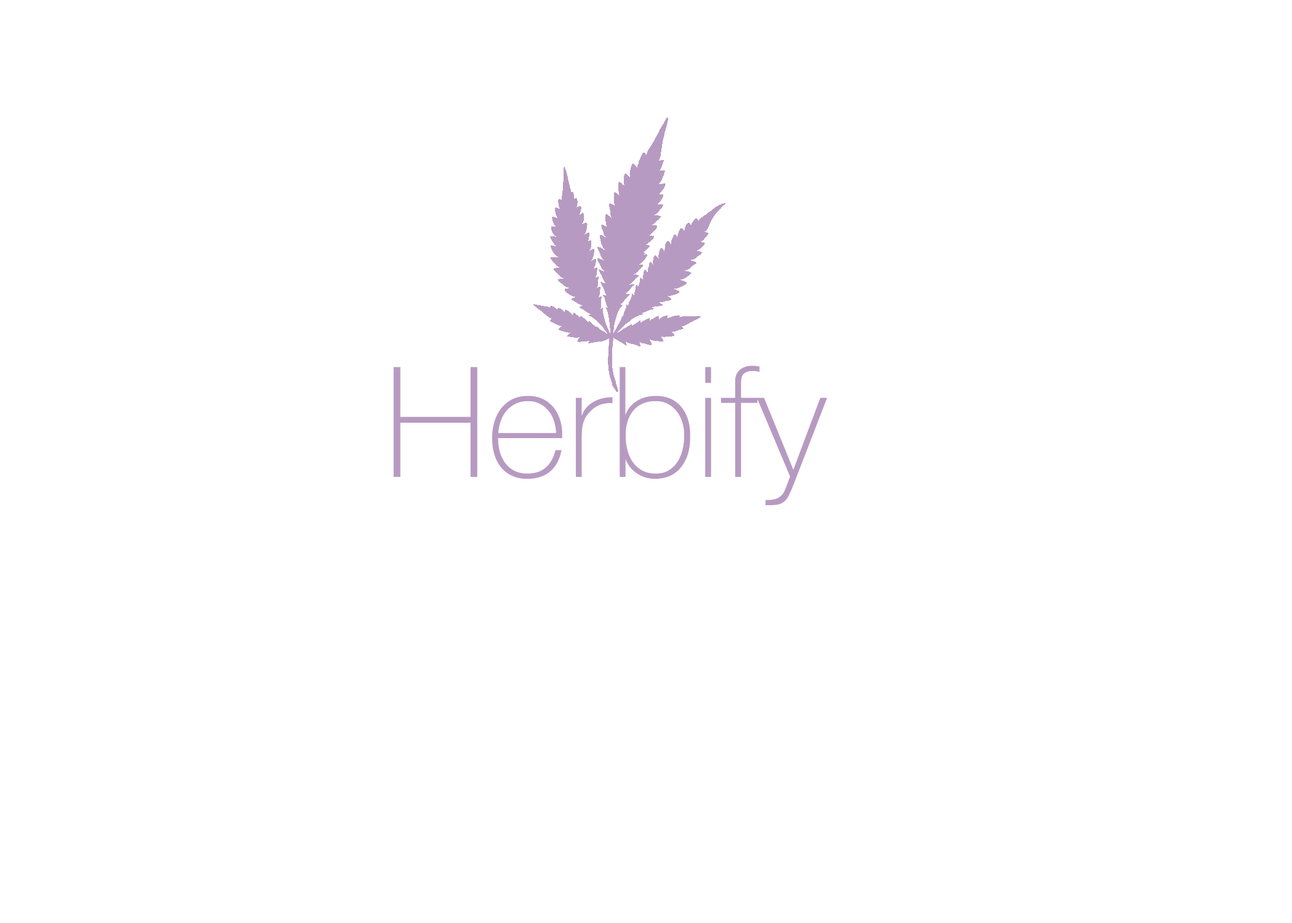
<style>
.page{position:relative;width:1292px;height:923px;background:#ffffff}
.page>*{position:absolute;margin:0}
.t1{font:153.8px "HelveticaNeue-Thin";color:#b79ac1}
</style>
<div class="page">
<p class="t1" style="left:393px;top:365px;width:435px;height:140px">Herbify</p>
</div>
